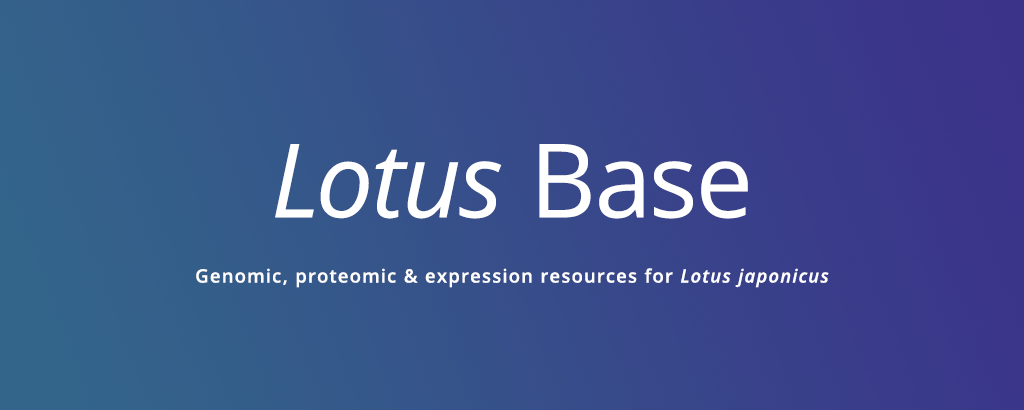
<style>
.page{position:relative;width:1024px;height:410px}
.page>*{position:absolute;margin:0}
.t1{font:102.5px "OpenSans-Italic";color:#ffffff}
.t2{font:102.5px "OpenSans";color:#ffffff}
.t3{font:18.4px "OpenSans-Semibold";letter-spacing:0.075em;color:#ffffff}
.t4{font:18.4px "OpenSans-SemiboldItalic";letter-spacing:0.075em;color:#ffffff}
</style>
<div class="page">
<p class="t1" style="left:275px;top:144px;width:473px;height:75px">Lotus <span class="t2">Base</span></p>
<p class="t3" style="left:196px;top:268px;width:633px;height:20px">Genomic, proteomic &amp; expression resources for <span class="t4">Lotus japonicus</span></p>
</div>
